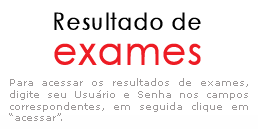
<style>
.page{position:relative;width:258px;height:129px;background:#ffffff}
.page>*{position:absolute;margin:0}
.t1{font:10px/11.7px "Verdana";color:#9d9999}
</style>
<div class="page">
<p class="t1" style="left:9px;top:78px;width:239px;height:43px;text-align:justify">Para acessar os resultados de exames, digite seu Usuário e Senha nos campos correspondentes, em seguida clique em “acessar”.</p>
</div>
